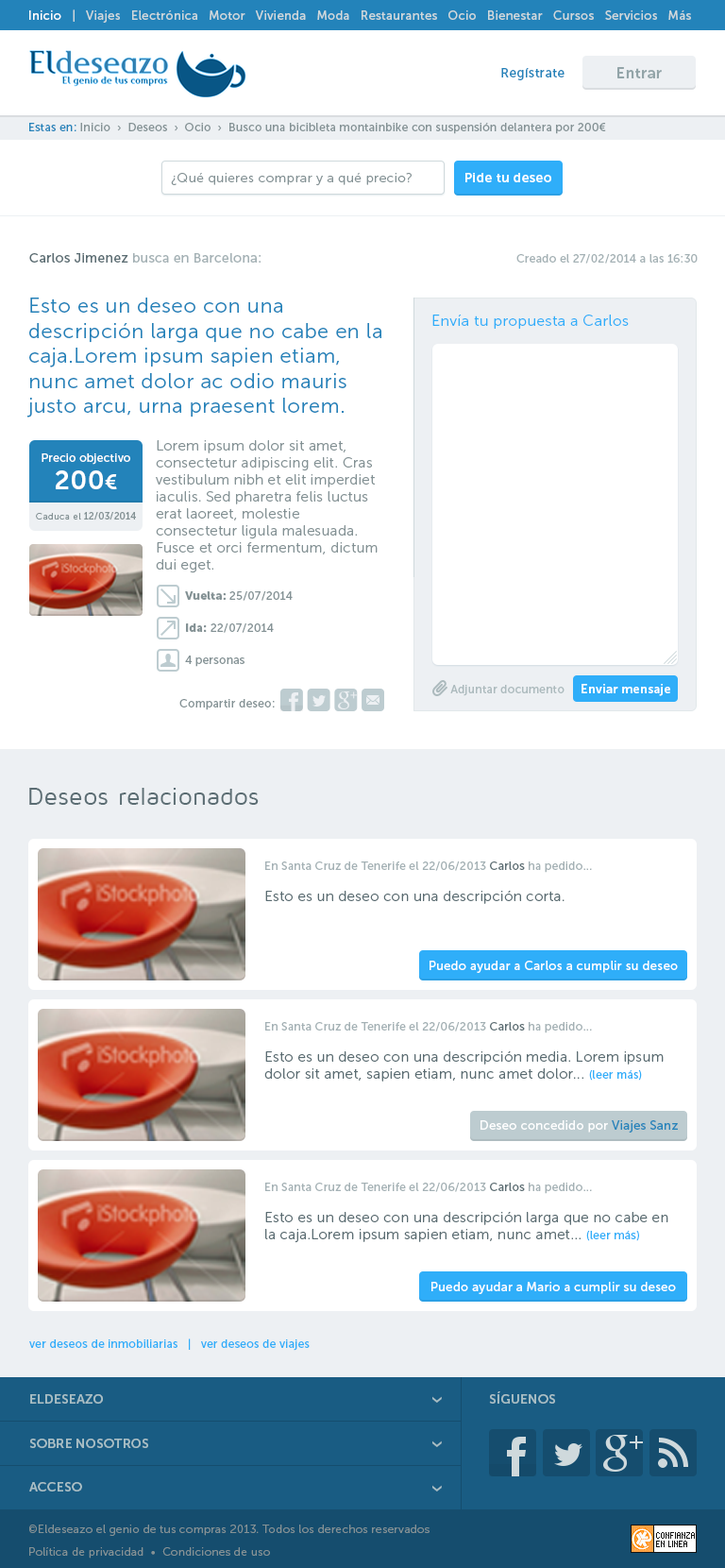
<style>
.page{position:relative;width:725px;height:1568px;background:#ffffff}
.page>*{position:absolute;margin:0}
.t1{font:12.3px "MuseoSans-500";letter-spacing:0.025em;color:#cfd9dc}
.t2{font:12.3px "MuseoSans-500";letter-spacing:0.025em;color:#ffffff}
.t3{font:13.2px "MuseoSans-500";letter-spacing:0.025em;color:#2383ba}
.t4{font:15.1px "MuseoSans-700";letter-spacing:0.025em;color:#92a4a8}
.t5{font:11.3px "MuseoSans-500";letter-spacing:0.025em;color:#849295}
.t6{font:11.3px "MuseoSans-500";letter-spacing:0.025em;color:#2383ba}
.t7{font:13.2px "MuseoSans-300";letter-spacing:0.025em;color:#849295}
.t8{font:13.2px "MuseoSans-700";letter-spacing:0.025em;color:#ffffff}
.t9{font:13.2px "MuseoSans-500";letter-spacing:0.025em;color:#a4b1b5}
.t10{font:13.2px "MuseoSans-500";letter-spacing:0.025em;color:#5b6d73}
.t11{font:11.3px "MuseoSans-500";letter-spacing:0.025em;color:#a4b1b5}
.t12{font:14.2px "MuseoSans-300";letter-spacing:0.025em;color:#849295}
.t13{font:20.8px "MuseoSans-300";letter-spacing:0.025em;color:#2383ba}
.t14{font:15.1px "MuseoSans-300";letter-spacing:0.025em;color:#2faef9}
.t15{font:11.3px "MuseoSans-500";letter-spacing:0.025em;color:#ffffff}
.t16{font:26.4px "MuseoSans-700";letter-spacing:0.025em;color:#ffffff}
.t17{font:20.8px "MuseoSans-700";letter-spacing:0.025em;color:#ffffff}
.t18{font:9.4px "MuseoSans-500";letter-spacing:0.025em;color:#849295}
.t19{font:9.4px "MuseoSans-300";letter-spacing:0.025em;color:#849295}
.t20{font:11.3px "MuseoSans-900";letter-spacing:0.025em;color:#849295}
.t21{font:11.3px "MuseoSans-500";letter-spacing:0.025em;color:#bdccd0}
.t22{font:12.3px "MuseoSans-700";letter-spacing:0.025em;color:#ffffff}
.t23{font:24.6px "MavenProRegular";letter-spacing:0.025em;color:#5b6d73}
.t24{font:14.2px "MuseoSans-300";letter-spacing:0.025em;color:#5b6d73}
.t25{font:11.3px "MuseoSans-500";letter-spacing:0.025em;color:#5b6d73}
.t26{font:11.3px "MuseoSans-500";letter-spacing:0.025em;color:#2faef9}
.t27{font:12.3px "MuseoSans-500";letter-spacing:0.025em;color:#2383ba}
.t28{font:13.2px "MuseoSans-700";color:#a9bfc5}
.t29{font:22.7px "MuseoSans-500";color:#a9bfc5}
.t30{font:13.2px "MuseoSans-700";color:#a9bfc5;text-transform:uppercase}
.t31{font:11.3px/22.7px "MuseoSans-300";letter-spacing:0.025em;color:#849295}
</style>
<div class="page">
<p class="t1" style="left:29px;top:9px;width:662px;height:14px"><span class="t2">Inicio   </span>|   Viajes   Electrónica   Motor   Vivienda   Moda   Restaurantes   Ocio   Bienestar   Cursos   Servicios   Más</p>
<p class="t3" style="left:502px;top:68px;width:63px;height:12px">Regístrate</p>
<p class="t4" style="left:618px;top:67px;width:44px;height:11px">Entrar</p>
<p class="t5" style="left:29px;top:123px;width:577px;height:11px"><span class="t6">Estas en: </span>Inicio  ›  Deseos  ›  Ocio  ›  Busco una bicibleta montainbike con suspensión delantera por 200€</p>
<p class="t7" style="left:171px;top:173px;width:241px;height:13px">¿Qué quieres comprar y a qué precio?</p>
<p class="t8" style="left:466px;top:173px;width:86px;height:9px">Pide tu deseo</p>
<p class="t9" style="left:29px;top:253px;width:232px;height:10px"><span class="t10">Carlos Jimenez </span>busca en Barcelona:</p>
<p class="t11" style="left:517px;top:254px;width:181px;height:10px">Creado el 27/02/2014 a las 16:30</p>
<p class="t12" style="left:27px;top:298px;width:355px;height:275px"><span class="t13">Esto es un deseo con una descripción larga que no cabe en la caja.Lorem ipsum sapien etiam, nunc amet dolor ac odio mauris justo arcu, urna praesent lorem.<br></span>Lorem ipsum dolor sit amet, consectetur adipiscing elit. Cras vestibulum nibh et elit imperdiet iaculis. Sed pharetra felis luctus erat laoreet, molestie consectetur ligula malesuada. Fusce et orci fermentum, dictum dui eget.</p>
<p class="t14" style="left:433px;top:315px;width:196px;height:14px">Envía tu propuesta a Carlos</p>
<p class="t15" style="left:42px;top:453px;width:88px;height:36px;text-align:center">Precio objectivo<br><span class="t16">200</span><span class="t17">€</span></p>
<p class="t18" style="left:36px;top:512px;width:100px;height:8px"><span class="t19">Caduca el</span> 12/03/2014</p>
<p class="t5" style="left:185px;top:591px;width:108px;height:10px"><span class="t20">Vuelta:</span> 25/07/2014</p>
<p class="t5" style="left:186px;top:623px;width:88px;height:10px"><span class="t20">Ida:</span> 22/07/2014</p>
<p class="t5" style="left:185px;top:656px;width:60px;height:11px">4 personas</p>
<p class="t21" style="left:451px;top:685px;width:114px;height:11px">Adjuntar documento</p>
<p class="t22" style="left:582px;top:684px;width:89px;height:12px">Enviar mensaje</p>
<p class="t5" style="left:179px;top:699px;width:96px;height:11px">Compartir deseo:</p>
<p class="t23" style="left:29px;top:788px;width:230px;height:17px">Deseos relacionados</p>
<p class="t24" style="left:265px;top:861px;width:327px;height:43px"><span class="t11">En Santa Cruz de Tenerife el 22/06/2013</span><span class="t25"> Carlos </span><span class="t11">ha pedido...<br></span>Esto es un deseo con una descripción corta.</p>
<p class="t2" style="left:430px;top:961px;width:248px;height:12px">Puedo ayudar a Carlos a cumplir su deseo</p>
<p class="t24" style="left:264px;top:1022px;width:400px;height:60px"><span class="t11">En Santa Cruz de Tenerife el 22/06/2013</span><span class="t25"> Carlos </span><span class="t11">ha pedido...<br></span>Esto es un deseo con una descripción media. Lorem ipsum dolor sit amet, sapien etiam, nunc amet dolor... <span class="t26">(leer más)</span></p>
<p class="t2" style="left:481px;top:1120px;width:197px;height:13px">Deseo concedido por <span class="t27">Viajes Sanz</span></p>
<p class="t24" style="left:265px;top:1183px;width:404px;height:60px"><span class="t11">En Santa Cruz de Tenerife el 22/06/2013</span><span class="t25"> Carlos </span><span class="t11">ha pedido...<br></span>Esto es un deseo con una descripción larga que no cabe en la caja.Lorem ipsum sapien etiam, nunc amet... <span class="t26">(leer más)</span></p>
<p class="t2" style="left:432px;top:1282px;width:244px;height:12px">Puedo ayudar a Mario a cumplir su deseo</p>
<p class="t26" style="left:29px;top:1338px;width:281px;height:13px">ver deseos de inmobiliarias   |   ver deseos de viajes</p>
<p class="t28" style="left:30px;top:1394px;width:73px;height:10px">ELDESEAZO</p>
<p class="t29" style="left:433px;top:1396px;width:9px;height:7px;rotate:90deg">›</p>
<p class="t30" style="left:489px;top:1391px;width:66px;height:13px">Síguenos</p>
<p class="t28" style="left:29px;top:1439px;width:119px;height:9px">SOBRE NOSOTROS</p>
<p class="t29" style="left:433px;top:1440px;width:9px;height:7px;rotate:90deg">›</p>
<p class="t28" style="left:29px;top:1482px;width:53px;height:9px">ACCESO</p>
<p class="t29" style="left:433px;top:1485px;width:9px;height:6px;rotate:90deg">›</p>
<p class="t31" style="left:29px;top:1525px;width:401px;height:34px">©Eldeseazo el genio de tus compras 2013. Todos los derechos reservados<br>Política de privacidad  •  Condiciones de uso</p>
</div>
